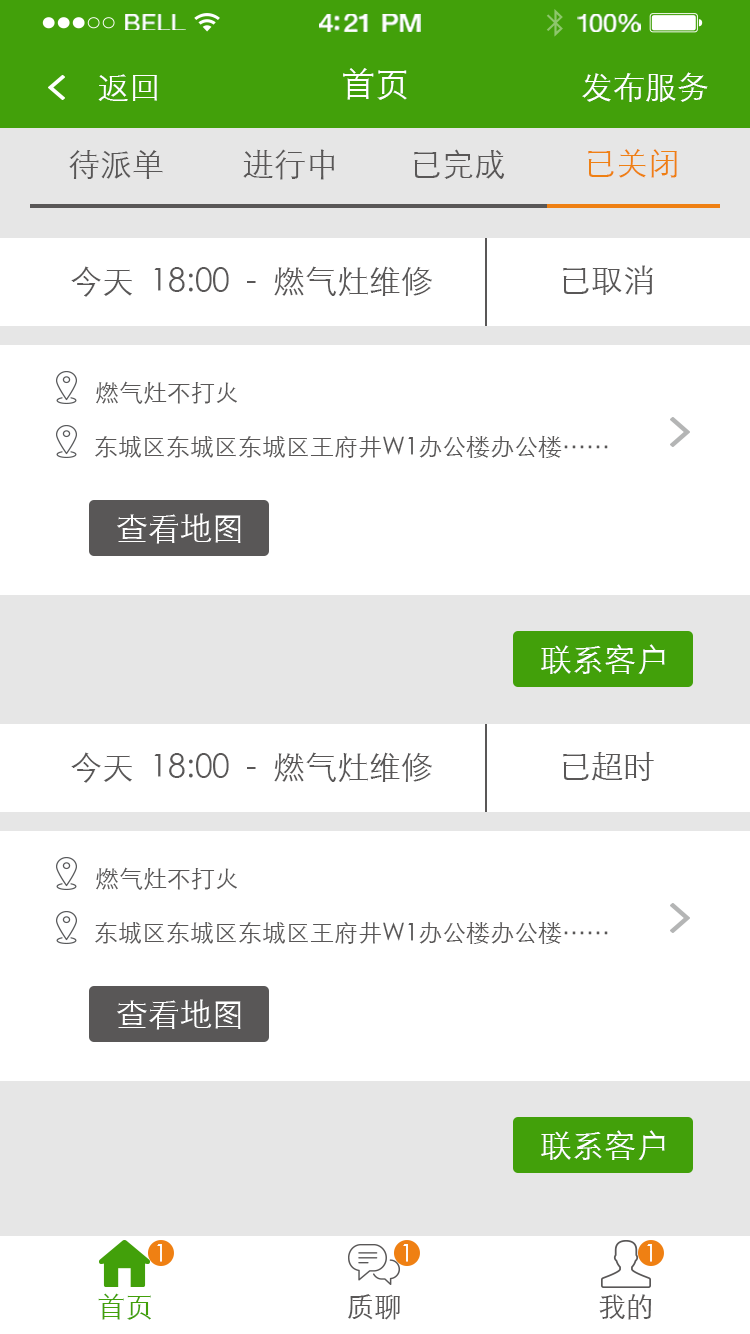
<style>
.page{position:relative;width:750px;height:1334px;background:#ffffff}
.page>*{position:absolute;margin:0}
.t1{font:23.3px "HelveticaNeue";letter-spacing:0.02em;color:#ffffff;scale:1.06 1}
.t2{font:25.3px "HelveticaNeue-Medium";letter-spacing:-0.02em;color:#ffffff;scale:1.06 1}
.t3{font:24.3px "HelveticaNeue";letter-spacing:-0.02em;color:#ffffff;scale:1.06 1}
.t4{font:32px "STXihei";color:#ffffff}
.t5{font:34px "STXihei";color:#ffffff}
.t6{font:32px "STXihei";color:#595757}
.t7{font:32px "STXihei";color:#ef8013}
.t8{font:24px "STXihei";color:#595757}
.t9{font:24px "STXihei";color:#ffffff}
.t10{font:28px "STXihei";color:#42a00a}
.t11{font:28px "STXihei";color:#595757}
</style>
<div class="page">
<p class="t1" style="left:125px;top:14px;width:61px;height:16px">BELL</p>
<p class="t2" style="left:319px;top:14px;width:102px;height:18px">4:21 PM</p>
<p class="t3" style="left:577px;top:14px;width:64px;height:18px">100%</p>
<p class="t4" style="left:98px;top:74px;width:59px;height:27px">返回</p>
<p class="t5" style="left:343px;top:68px;width:64px;height:32px">首页</p>
<p class="t4" style="left:582px;top:72px;width:126px;height:30px">发布服务</p>
<p class="t6" style="left:69px;top:150px;width:94px;height:29px">待派单</p>
<p class="t6" style="left:243px;top:149px;width:91px;height:31px">进行中</p>
<p class="t6" style="left:414px;top:149px;width:91px;height:30px">已完成</p>
<p class="t7" style="left:588px;top:149px;width:89px;height:29px">已关闭</p>
<p class="t6" style="left:71px;top:266px;width:361px;height:31px">今天  18:00  -  燃气灶维修</p>
<p class="t6" style="left:563px;top:265px;width:90px;height:30px">已取消</p>
<p class="t8" style="left:96px;top:381px;width:141px;height:23px">燃气灶不打火</p>
<p class="t8" style="left:95px;top:435px;width:513px;height:23px">东城区东城区东城区王府井W1办公楼办公楼……</p>
<p class="t4" style="left:117px;top:513px;width:124px;height:31px">查看地图</p>
<p class="t4" style="left:541px;top:644px;width:124px;height:31px">联系客户</p>
<p class="t6" style="left:71px;top:752px;width:361px;height:31px">今天  18:00  -  燃气灶维修</p>
<p class="t6" style="left:563px;top:751px;width:91px;height:30px">已超时</p>
<p class="t8" style="left:96px;top:867px;width:141px;height:23px">燃气灶不打火</p>
<p class="t8" style="left:95px;top:921px;width:513px;height:23px">东城区东城区东城区王府井W1办公楼办公楼……</p>
<p class="t4" style="left:117px;top:999px;width:124px;height:31px">查看地图</p>
<p class="t4" style="left:541px;top:1130px;width:124px;height:31px">联系客户</p>
<p class="t9" style="left:157px;top:1244px;width:5px;height:18px">1</p>
<p class="t9" style="left:403px;top:1244px;width:5px;height:18px">1</p>
<p class="t9" style="left:647px;top:1244px;width:5px;height:18px">1</p>
<p class="t10" style="left:98px;top:1293px;width:53px;height:27px">首页</p>
<p class="t11" style="left:348px;top:1294px;width:52px;height:26px">质聊</p>
<p class="t11" style="left:599px;top:1294px;width:53px;height:26px">我的</p>
</div>
